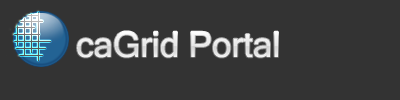
<style>
.page{position:relative;width:400px;height:100px;background:#333333}
.page>*{position:absolute;margin:0}
.t1{font:35px "MicrosoftSansSerif";color:#ffffff}
</style>
<div class="page">
<p class="t1" style="left:77px;top:31px;width:201px;height:27px">caGrid Portal</p>
</div>
